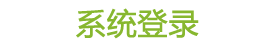
<style>
.page{position:relative;width:279px;height:50px;background:#ffffff}
.page>*{position:absolute;margin:0}
.t1{font:30px "MicrosoftYaHei";color:#87b72f;font-weight:bold}
</style>
<div class="page">
<p class="t1" style="left:76px;top:8px;width:123px;height:31px">系统登录</p>
</div>
